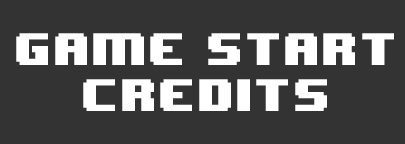
<style>
.page{position:relative;width:405px;height:144px;background:#333333}
.page>*{position:absolute;margin:0}
.t1{font:38px "8BITWONDERNominal";letter-spacing:0.01em;color:#ffffff}
</style>
<div class="page">
<p class="t1" style="left:16px;top:33px;width:378px;height:78px;text-align:center">GAME START<br>CREDITS</p>
</div>
